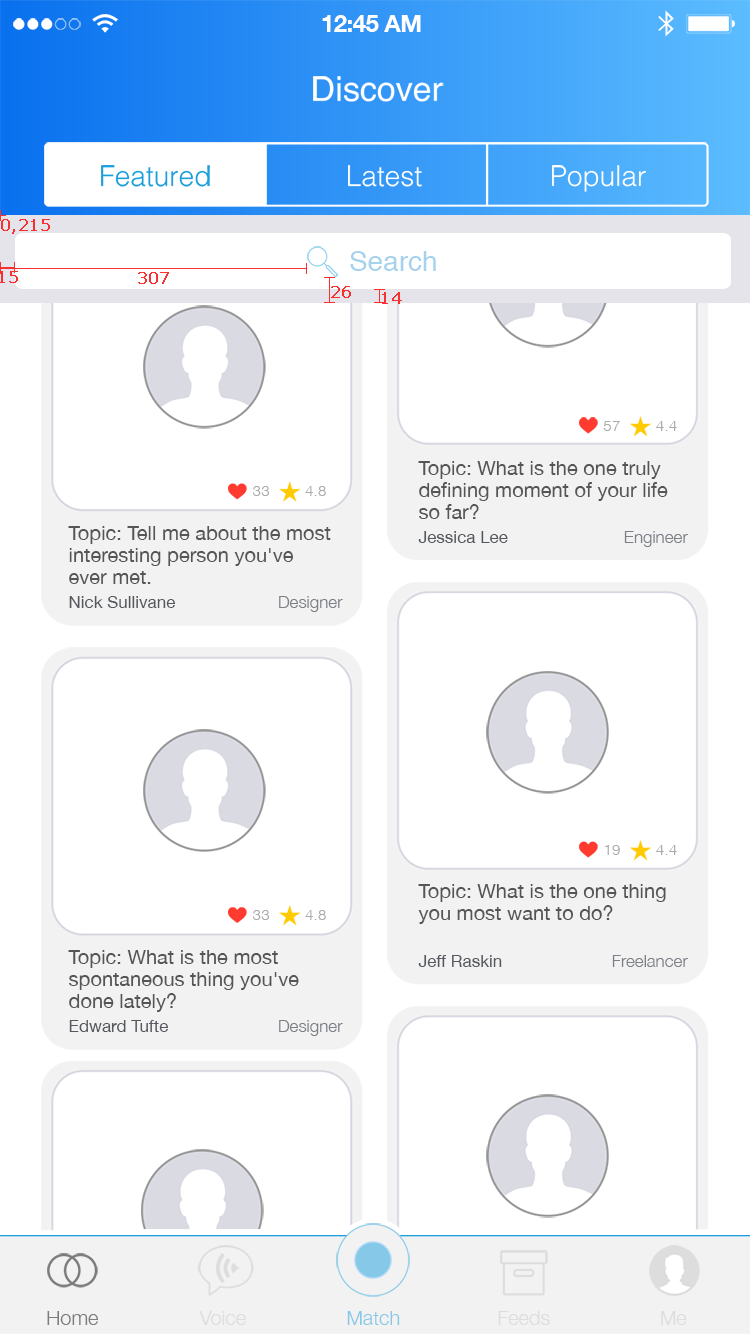
<style>
.page{position:relative;width:750px;height:1334px;background:#ffffff}
.page>*{position:absolute;margin:0}
.t1{font:23.8px "HelveticaNeue-Bold";letter-spacing:-0.02em;color:#ffffff}
.t2{font:16px "Verdana";color:#f83030;font-weight:bold}
.t3{font:28px "Helvetica";color:#a7d2ee}
.t4{font:15.5px "Helvetica-Light";color:#ababab}
.t5{font:20px/22px "HelveticaNeue";color:#555555}
.t6{font:17px "HelveticaNeue";color:#55585e}
.t7{font:17px "HelveticaNeue-Light";color:#7d7f87}
.t8{font:20px "HelveticaNeue-Light";color:#7c7c7c}
.t9{font:20px "HelveticaNeue-Light";color:#dddddd}
.t10{font:20px "HelveticaNeue-Light";color:#86c8e7}
</style>
<div class="page">
<p class="t1" style="left:322px;top:15px;width:99px;height:17px">12:45 AM</p>
<p class="t2" style="left:1px;top:219px;width:49px;height:15px">0,215</p>
<p class="t3" style="left:350px;top:251px;width:86px;height:20px">Search</p>
<p class="t2" style="left:0px;top:271px;width:18px;height:12px">15</p>
<p class="t2" style="left:138px;top:272px;width:31px;height:12px">307</p>
<p class="t2" style="left:331px;top:286px;width:20px;height:12px">26</p>
<p class="t2" style="left:382px;top:292px;width:20px;height:12px">14</p>
<p class="t4" style="left:603px;top:421px;width:17px;height:10px">57</p>
<p class="t4" style="left:656px;top:421px;width:21px;height:10px">4.4</p>
<p class="t5" style="left:418px;top:461px;width:250px;height:58px">Topic: What is the one truly <br>defining moment of your life <br>so far?</p>
<p class="t4" style="left:252px;top:486px;width:18px;height:10px">33</p>
<p class="t4" style="left:305px;top:486px;width:21px;height:10px">4.8</p>
<p class="t5" style="left:68px;top:526px;width:263px;height:58px">Topic: Tell me about the most <br>interesting person you've <br>ever met.</p>
<p class="t6" style="left:418px;top:531px;width:90px;height:12px">Jessica Lee</p>
<p class="t7" style="left:624px;top:531px;width:64px;height:16px">Engineer</p>
<p class="t6" style="left:69px;top:596px;width:107px;height:12px">Nick Sullivane</p>
<p class="t7" style="left:279px;top:596px;width:64px;height:16px">Designer</p>
<p class="t4" style="left:604px;top:845px;width:16px;height:10px">19</p>
<p class="t4" style="left:656px;top:845px;width:21px;height:10px">4.4</p>
<p class="t5" style="left:418px;top:884px;width:248px;height:40px">Topic: What is the one thing <br>you most want to do?</p>
<p class="t4" style="left:252px;top:910px;width:18px;height:10px">33</p>
<p class="t4" style="left:305px;top:910px;width:21px;height:10px">4.8</p>
<p class="t5" style="left:68px;top:950px;width:231px;height:62px">Topic: What is the most <br>spontaneous thing you've <br>done lately?</p>
<p class="t6" style="left:418px;top:955px;width:84px;height:12px">Jeff Raskin</p>
<p class="t7" style="left:612px;top:955px;width:76px;height:12px">Freelancer</p>
<p class="t6" style="left:69px;top:1020px;width:100px;height:12px">Edward Tufte</p>
<p class="t7" style="left:279px;top:1020px;width:64px;height:16px">Designer</p>
<p class="t8" style="left:47px;top:1311px;width:51px;height:14px">Home</p>
<p class="t9" style="left:199px;top:1311px;width:47px;height:14px">Voice</p>
<p class="t10" style="left:347px;top:1311px;width:53px;height:14px">Match</p>
<p class="t9" style="left:498px;top:1311px;width:52px;height:14px">Feeds</p>
<p class="t9" style="left:661px;top:1311px;width:26px;height:14px">Me</p>
</div>
